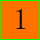
<style>
.page{position:relative;width:40px;height:40px;background:#ff7200}
.page>*{position:absolute;margin:0}
.t1{font:30px "SimSun";color:#000000}
</style>
<div class="page">
<p class="t1" style="left:16px;top:8px;width:10px;height:21px">1</p>
</div>
